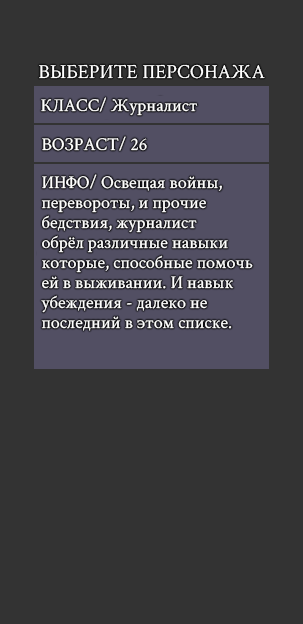
<style>
.page{position:relative;width:303px;height:624px;background:#333333}
.page>*{position:absolute;margin:0}
.t1{font:20px "CrimsonText-Regular";color:#ffffff}
.t2{font:18px "CrimsonText-Regular";color:#ffffff}
.t3{font:18px/20px "CrimsonText-Regular";color:#ffffff}
</style>
<div class="page">
<p class="t1" style="left:39px;top:64px;width:226px;height:15px">ВЫБЕРИТЕ ПЕРСОНАЖА</p>
<p class="t2" style="left:41px;top:97px;width:157px;height:19px">КЛАСС/ Журналист</p>
<p class="t2" style="left:42px;top:136px;width:105px;height:15px">ВОЗРАСТ/ 26</p>
<p class="t3" style="left:41px;top:174px;width:212px;height:157px">ИНФО/ Освещая войны,<br>перевороты, и прочие<br>бедствия, журналист<br>обрёл различные навыки<br>которые, способные помочь<br>ей в выживании. И навык<br>убеждения - далеко не<br>последний в этом списке.</p>
</div>
